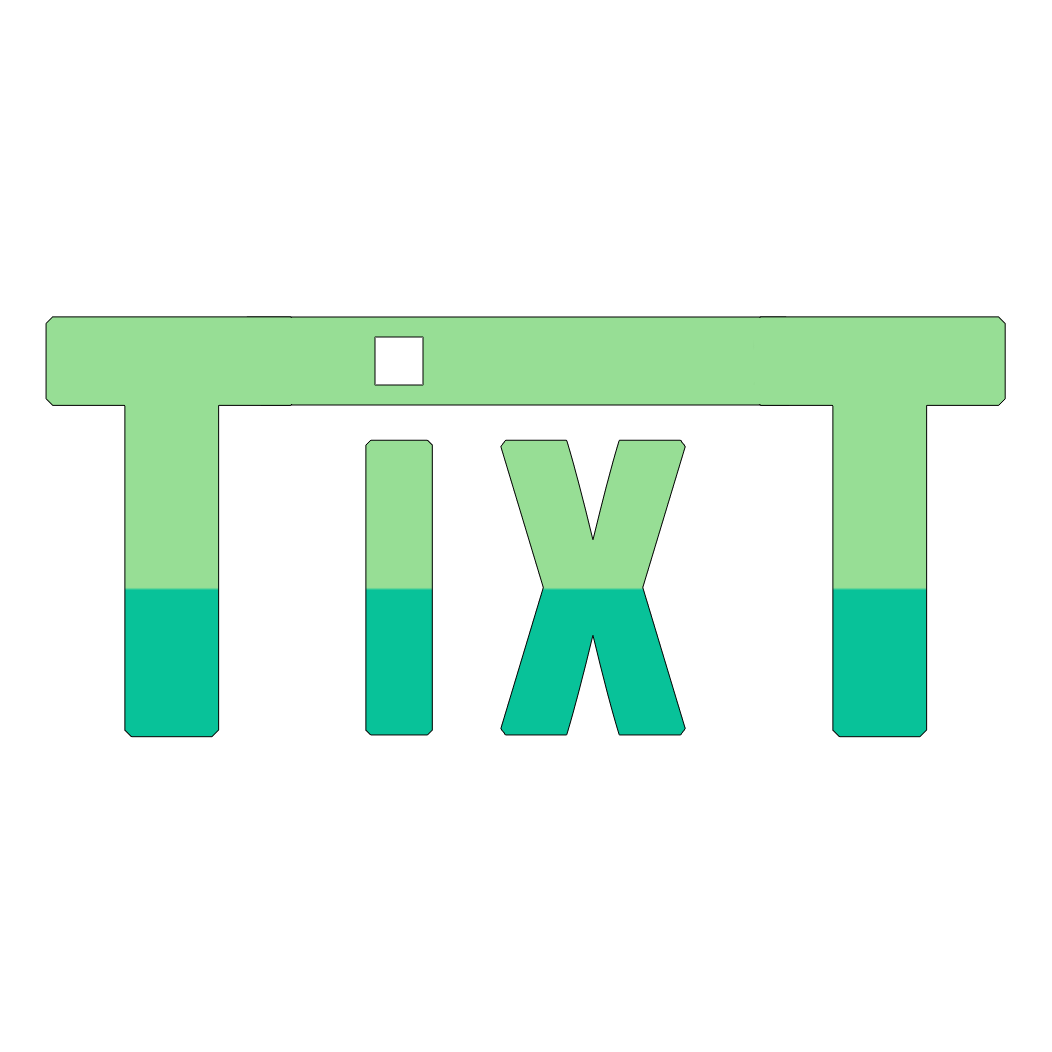
<style>
.page{position:relative;width:1052px;height:1052px;background:#ffffff}
.page>*{position:absolute;margin:0}
.t1{font:491.7px "Evogria";letter-spacing:0.075em;font-weight:bold}
.t2{font:362.5px "Evogria";letter-spacing:0.075em;font-weight:bold}
.t3{font:362.5px "Evogria";letter-spacing:0.168em;font-weight:bold}
</style>
<div class="page">
<p class="t1" style="left:46px;top:316px;width:960px;height:421px">T<span class="t2">i</span><span class="t3">x</span>T</p>
</div>
